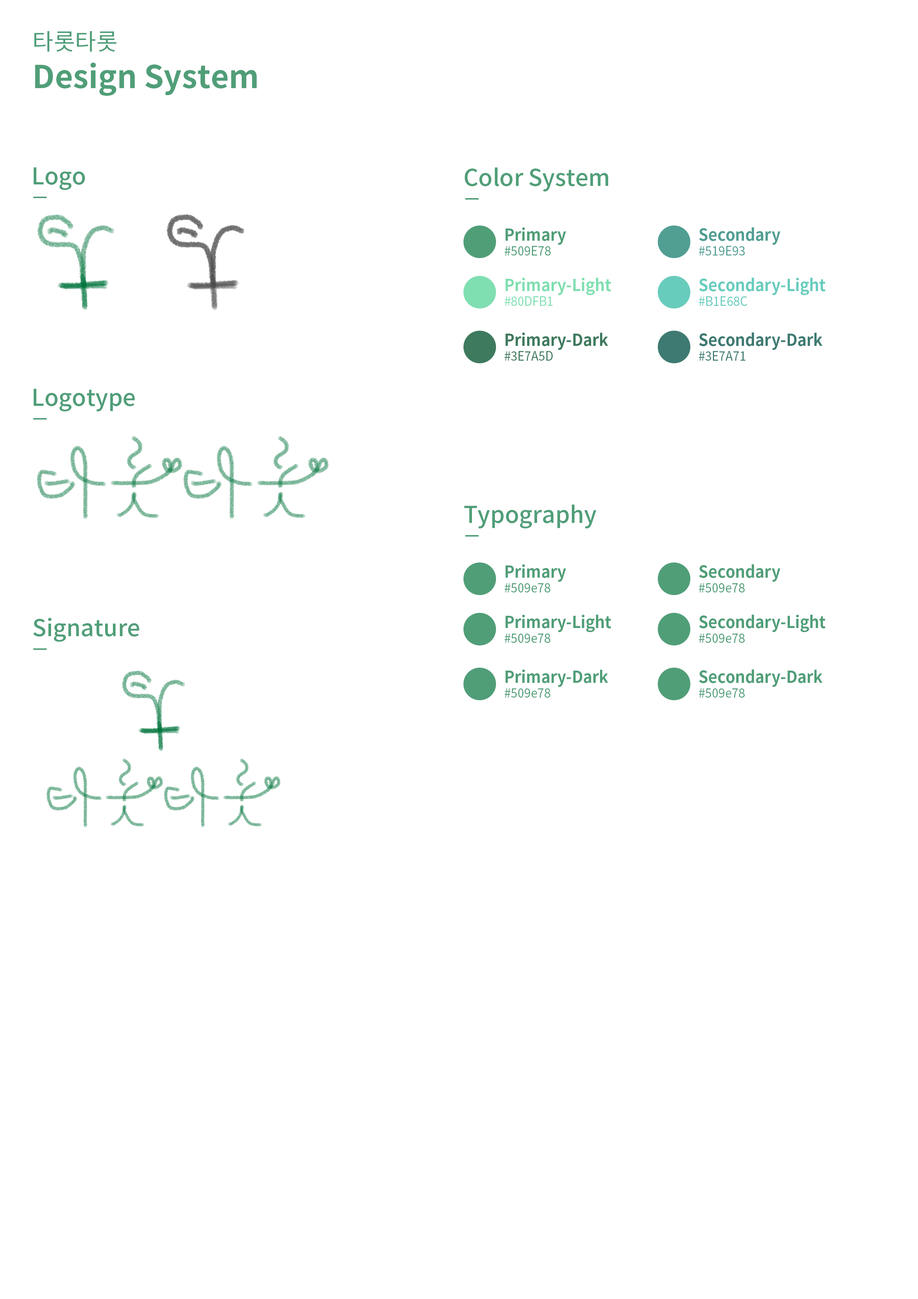
<style>
.page{position:relative;width:918px;height:1299px;background:#ffffff}
.page>*{position:absolute;margin:0}
.t1{font:31.4px/30.9px "NotoSansCJKkr-Bold";color:#509e78}
.t2{font:23.1px/30.9px "NotoSansCJKkr-Regular";color:#509e78}
.t3{font:23.1px "NotoSansCJKkr-Medium";color:#509e78}
.t4{font:16.5px "NotoSansCJKkr-Bold";color:#509e78;scale:0.95 1}
.t5{font:16.5px "NotoSansCJKkr-Bold";color:#519e93;scale:0.95 1}
.t6{font:12.7px "NotoSansCJKkr-Regular";color:#509e78;scale:0.95 1}
.t7{font:12.7px "NotoSansCJKkr-Regular";color:#519e93;scale:0.95 1}
.t8{font:16.5px "NotoSansCJKkr-Bold";color:#80dfb1;scale:0.95 1}
.t9{font:16.5px "NotoSansCJKkr-Bold";color:#68ccbd;scale:0.95 1}
.t10{font:12.7px "NotoSansCJKkr-Regular";color:#80dfb1;scale:0.95 1}
.t11{font:12.7px "NotoSansCJKkr-Regular";color:#68ccbd;scale:0.95 1}
.t12{font:16.5px "NotoSansCJKkr-Bold";color:#3e7a5d;scale:0.95 1}
.t13{font:16.5px "NotoSansCJKkr-Bold";color:#3e7a71;scale:0.95 1}
.t14{font:12.7px "NotoSansCJKkr-Regular";color:#3e7a5d;scale:0.95 1}
.t15{font:12.7px "NotoSansCJKkr-Regular";color:#3e7a71;scale:0.95 1}
</style>
<div class="page">
<p class="t1" style="left:34px;top:31px;width:223px;height:65px"><span class="t2">타롯타롯<br></span>Design System</p>
<p class="t3" style="left:34px;top:167px;width:51px;height:23px">Logo</p>
<p class="t3" style="left:465px;top:167px;width:143px;height:24px">Color System</p>
<p class="t4" style="left:505px;top:227px;width:61px;height:18px">Primary</p>
<p class="t5" style="left:699px;top:227px;width:81px;height:18px">Secondary</p>
<p class="t6" style="left:505px;top:246px;width:46px;height:9px">#509E78</p>
<p class="t7" style="left:699px;top:246px;width:46px;height:9px">#519E93</p>
<p class="t8" style="left:505px;top:278px;width:106px;height:17px">Primary-Light</p>
<p class="t9" style="left:699px;top:278px;width:127px;height:17px">Secondary-Light</p>
<p class="t10" style="left:505px;top:296px;width:48px;height:10px">#80DFB1</p>
<p class="t11" style="left:699px;top:296px;width:48px;height:10px">#B1E68C</p>
<p class="t12" style="left:505px;top:332px;width:103px;height:18px">Primary-Dark</p>
<p class="t13" style="left:699px;top:332px;width:124px;height:18px">Secondary-Dark</p>
<p class="t14" style="left:505px;top:351px;width:48px;height:10px">#3E7A5D</p>
<p class="t15" style="left:699px;top:351px;width:47px;height:10px">#3E7A71</p>
<p class="t3" style="left:34px;top:389px;width:101px;height:22px">Logotype</p>
<p class="t3" style="left:464px;top:504px;width:132px;height:24px">Typography</p>
<p class="t4" style="left:505px;top:564px;width:61px;height:18px">Primary</p>
<p class="t4" style="left:699px;top:564px;width:81px;height:18px">Secondary</p>
<p class="t6" style="left:505px;top:583px;width:46px;height:9px">#509e78</p>
<p class="t6" style="left:699px;top:583px;width:46px;height:9px">#509e78</p>
<p class="t3" style="left:33px;top:618px;width:106px;height:24px">Signature</p>
<p class="t4" style="left:505px;top:615px;width:106px;height:17px">Primary-Light</p>
<p class="t4" style="left:699px;top:615px;width:127px;height:17px">Secondary-Light</p>
<p class="t6" style="left:505px;top:633px;width:46px;height:10px">#509e78</p>
<p class="t6" style="left:699px;top:633px;width:46px;height:10px">#509e78</p>
<p class="t4" style="left:505px;top:669px;width:103px;height:18px">Primary-Dark</p>
<p class="t4" style="left:699px;top:669px;width:124px;height:18px">Secondary-Dark</p>
<p class="t6" style="left:505px;top:688px;width:46px;height:9px">#509e78</p>
<p class="t6" style="left:699px;top:688px;width:46px;height:9px">#509e78</p>
</div>
